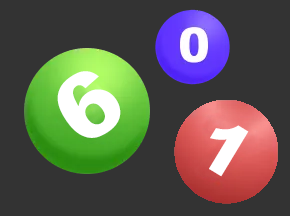
<style>
.page{position:relative;width:290px;height:216px;background:#333333}
.page>*{position:absolute;margin:0}
.t1{font:90px "Arial-Black";letter-spacing:0.1em;color:#ffffff}
.t2{font:72px "Arial-Black";letter-spacing:0.1em;color:#ffffff}
</style>
<div class="page">
<p class="t1" style="left:57px;top:71px;width:64px;height:67px;rotate:-34deg">6</p>
<p class="t2" style="left:209px;top:125px;width:40px;height:52px;rotate:31deg">1</p>
</div>
